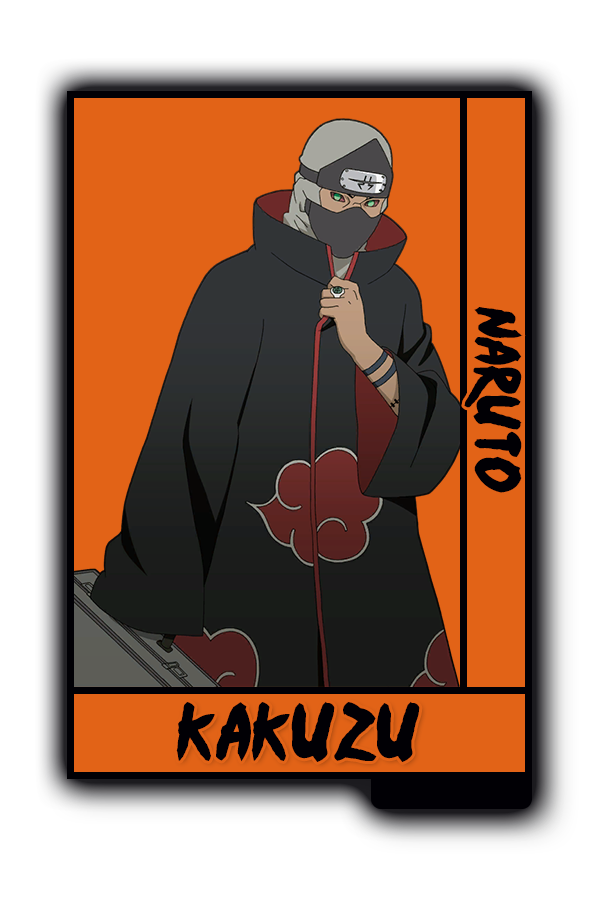
<style>
.page{position:relative;width:600px;height:900px;background:#e26317}
.page>*{position:absolute;margin:0}
.t1{font:52px "Ninja-Naruto";color:#010005}
.t2{font:65.2px "Ninja-Naruto";color:#010005}
</style>
<div class="page">
<p class="t1" style="left:464px;top:307px;width:59px;height:186px;rotate:90deg">Naruto</p>
<p class="t2" style="left:176px;top:701px;width:244px;height:61px">Kakuzu</p>
</div>
